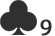
<style>
.page{position:relative;width:55px;height:36px;background:#ffffff}
.page>*{position:absolute;margin:0}
.t1{font:23.4px "MyriadPro-Regular";letter-spacing:-0.1em;color:#303030;font-weight:bold}
</style>
<div class="page">
<p class="t1" style="left:40px;top:19px;width:12px;height:17px">9</p>
</div>
